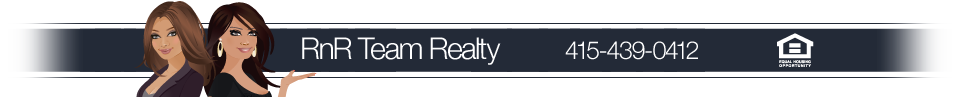
<style>
.page{position:relative;width:960px;height:97px;background:#ffffff}
.page>*{position:absolute;margin:0}
.t1{font:30px "HelveticaNeue-Light";letter-spacing:-0.05em;color:#ffffff}
.t2{font:25px "HelveticaNeue-Light";letter-spacing:-0.05em;color:#ffffff}
</style>
<div class="page">
<p class="t1" style="left:302px;top:37px;width:199px;height:28px">RnR Team Realty</p>
<p class="t2" style="left:565px;top:41px;width:133px;height:19px">415-439-0412</p>
</div>
